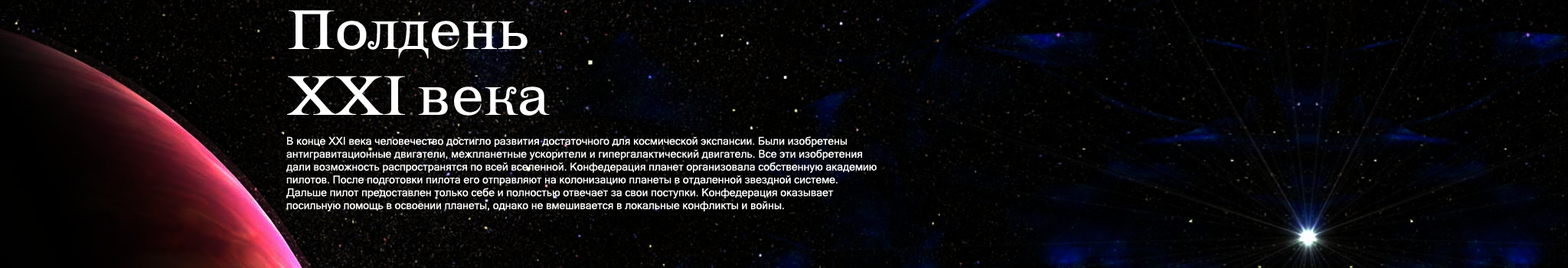
<style>
.page{position:relative;width:1568px;height:268px}
.page>*{position:absolute;margin:0}
.t1{font:55.1px "LehmannC";color:#ffffff}
.t2{font:10.7px "MicrosoftSansSerif";color:#ffffff}
</style>
<div class="page">
<p class="t1" style="left:287px;top:10px;width:263px;height:106px">Полдень<br>XXI века</p>
<p class="t2" style="left:286px;top:136px;width:591px;height:75px">В конце XXI века человечество достигло развития достаточного для космической экспансии. Были изобретены<br>антигравитационные двигатели, межпланетные ускорители и гипергалактический двигатель. Все эти изобретения<br>дали возможность распространятся по всей вселенной. Конфедерация планет организовала собственную академию<br>пилотов. После подготовки пилота его отправляют на колонизацию планеты в отдаленной звездной системе.<br>Дальше пилот предоставлен только себе и полностью отвечает за свои поступки. Конфедерация оказывает<br>посильную помощь в освоении планеты, однако не вмешивается в локальные конфликты и войны.</p>
</div>
